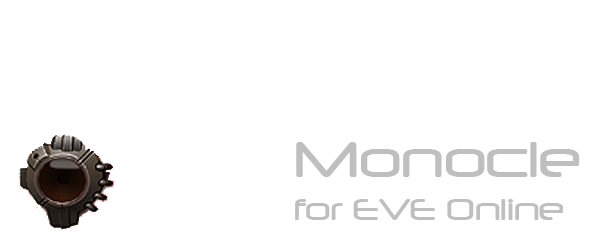
<style>
.page{position:relative;width:600px;height:250px;background:#ffffff}
.page>*{position:absolute;margin:0}
.t1{font:36px "Neuropol";color:#bfbfbf}
.t2{font:60px "Neuropol";color:#bfbfbf}
</style>
<div class="page">
<p class="t1" style="left:295px;top:142px;width:285px;height:78px"><span class="t2">Monocle<br></span>for EVE Online</p>
</div>
